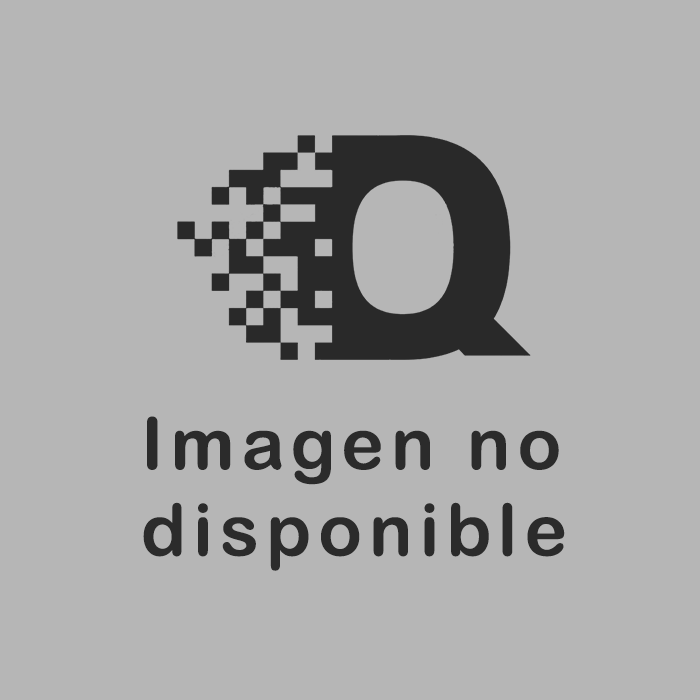
<style>
.page{position:relative;width:700px;height:700px;background:#b6b6b6}
.page>*{position:absolute;margin:0}
.t1{font:72px "ArialRoundedMTBold";letter-spacing:0.1em;color:#2b2b2b}
</style>
<div class="page">
<p class="t1" style="left:143px;top:416px;width:422px;height:155px">Imagen no<br>disponible</p>
</div>
